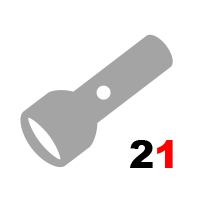
<style>
.page{position:relative;width:200px;height:200px;background:#ffffff}
.page>*{position:absolute;margin:0}
.t1{font:38px "Arial-Black";color:#000000}
.t2{font:38px "Arial-Black";color:#fe0000}
</style>
<div class="page">
<p class="t1" style="left:130px;top:140px;width:43px;height:28px">2<span class="t2">1</span></p>
</div>
